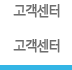
<style>
.page{position:relative;width:72px;height:70px;background:#ffffff}
.page>*{position:absolute;margin:0}
.t1{font:14px "MalgunGothicRegular";letter-spacing:-0.15em;color:#6e6e6e;font-weight:bold;scale:0.95 1}
</style>
<div class="page">
<p class="t1" style="left:13px;top:4px;width:47px;height:14px">고객센터</p>
<p class="t1" style="left:13px;top:39px;width:47px;height:14px">고객센터</p>
</div>
